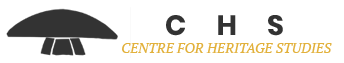
<style>
.page{position:relative;width:344px;height:63px;background:#ffffff}
.page>*{position:absolute;margin:0}
.t1{font:28px "Poppins-Bold";letter-spacing:1.08em;color:#333333}
.t2{font:14px "PTSerif-Italic";color:#e2b13c;text-transform:uppercase}
</style>
<div class="page">
<p class="t1" style="left:166px;top:15px;width:117px;height:21px">CHS</p>
<p class="t2" style="left:122px;top:43px;width:210px;height:10px">Centre for Heritage Studies</p>
</div>
